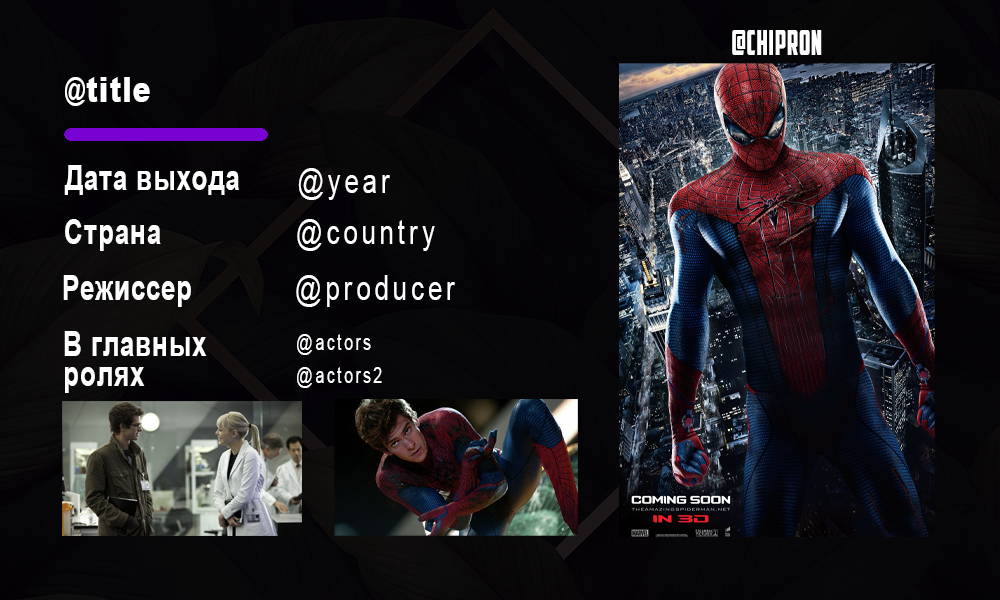
<style>
.page{position:relative;width:1000px;height:600px}
.page>*{position:absolute;margin:0}
.t1{font:34.2px "AA_American_Captain";letter-spacing:0.04em;color:#ffffff;scale:0.75 1}
.t2{font:35.5px "Arial-Black";letter-spacing:0.04em;color:#ffffff;scale:0.75 1}
.t3{font:34.2px "Arial-BoldMT";letter-spacing:0.04em;color:#ffffff;scale:0.75 1}
.t4{font:34.2px "ArialMT";letter-spacing:0.16em;color:#ffffff;scale:0.75 1}
.t5{font:21.8px "ArialMT";letter-spacing:0.14em;color:#ffffff;scale:0.75 1}
</style>
<div class="page">
<p class="t1" style="left:732px;top:30px;width:90px;height:25px">@chipron</p>
<p class="t2" style="left:64px;top:77px;width:86px;height:29px">@title</p>
<p class="t3" style="left:64px;top:165px;width:175px;height:30px">Дата выхода</p>
<p class="t4" style="left:298px;top:168px;width:92px;height:32px">@year</p>
<p class="t3" style="left:65px;top:219px;width:96px;height:32px">Страна</p>
<p class="t4" style="left:297px;top:219px;width:138px;height:32px">@country</p>
<p class="t3" style="left:63px;top:275px;width:128px;height:32px">Режиссер</p>
<p class="t4" style="left:296px;top:275px;width:159px;height:32px">@producer</p>
<p class="t3" style="left:64px;top:331px;width:143px;height:25px">В главных</p>
<p class="t5" style="left:297px;top:334px;width:74px;height:21px">@actors</p>
<p class="t3" style="left:65px;top:367px;width:80px;height:26px">ролях</p>
<p class="t5" style="left:297px;top:367px;width:85px;height:21px">@actors2</p>
</div>
